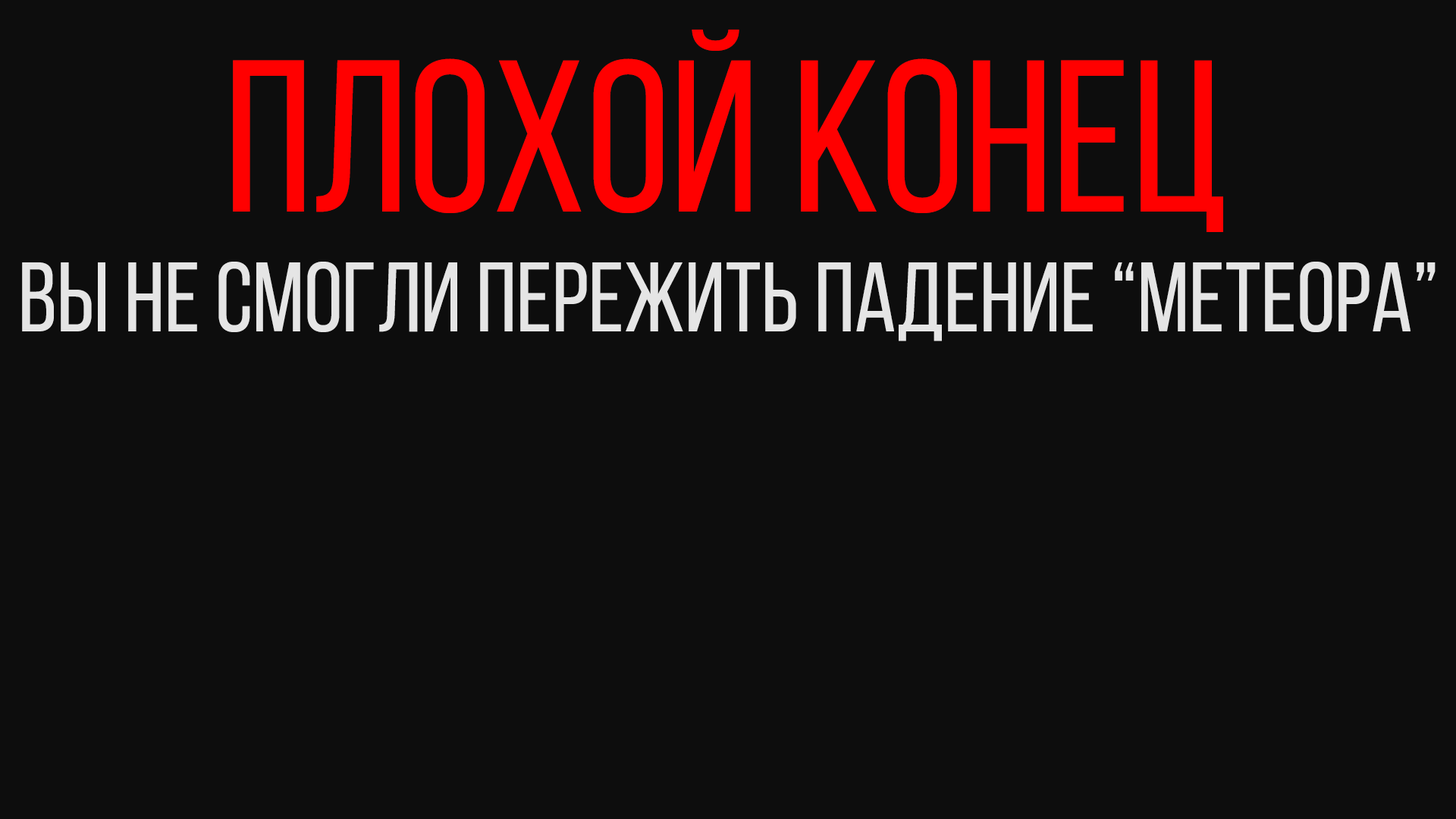
<style>
.page{position:relative;width:1456px;height:819px;background:#0d0d0d}
.page>*{position:absolute;margin:0}
.t1{font:215.9px "BebasNeueRegular";color:#ff0000}
.t2{font:98.5px "BebasNeueRegular";color:#e6e6e6}
</style>
<div class="page">
<p class="t1" style="left:233px;top:30px;width:990px;height:202px">плохой конец</p>
<p class="t2" style="left:22px;top:262px;width:1414px;height:79px">вы не смогли пережить падение “метеора”</p>
</div>
